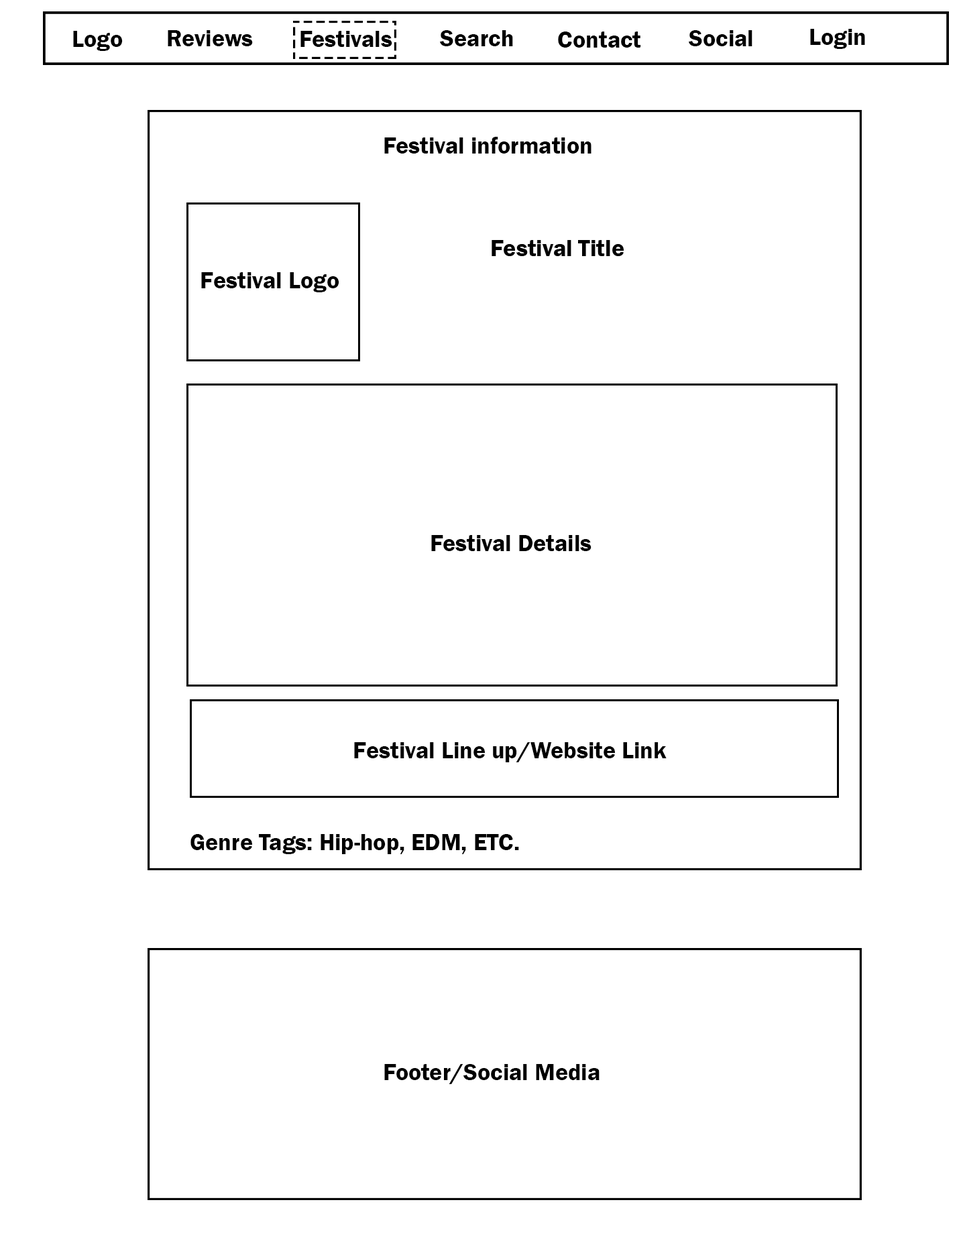
<style>
.page{position:relative;width:963px;height:1239px;background:#ffffff}
.page>*{position:absolute;margin:0}
.t1{font:24px "FranklinGothic-Demi";color:#000000}
</style>
<div class="page">
<p class="t1" style="left:810px;top:29px;width:55px;height:20px">Login</p>
<p class="t1" style="left:73px;top:31px;width:50px;height:20px">Logo</p>
<p class="t1" style="left:168px;top:30px;width:85px;height:16px">Reviews</p>
<p class="t1" style="left:300px;top:31px;width:92px;height:16px">Festivals</p>
<p class="t1" style="left:440px;top:30px;width:73px;height:16px">Search</p>
<p class="t1" style="left:558px;top:32px;width:83px;height:16px">Contact</p>
<p class="t1" style="left:688px;top:30px;width:64px;height:16px">Social</p>
<p class="t1" style="left:384px;top:137px;width:207px;height:17px">Festival information</p>
<p class="t1" style="left:201px;top:272px;width:138px;height:20px">Festival Logo</p>
<p class="t1" style="left:431px;top:535px;width:160px;height:16px">Festival Details</p>
<p class="t1" style="left:354px;top:742px;width:312px;height:20px">Festival Line up/Website Link</p>
<p class="t1" style="left:190px;top:834px;width:329px;height:20px">Genre Tags: Hip-hop, EDM, ETC.</p>
<p class="t1" style="left:384px;top:1064px;width:215px;height:20px">Footer/Social Media</p>
</div>
